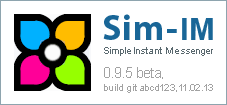
<style>
.page{position:relative;width:227px;height:105px;background:#ffffff}
.page>*{position:absolute;margin:0}
.t1{font:36.2px "MyriadPro-Bold";letter-spacing:0.02em;color:#196697}
.t2{font:36.2px "Arial-BoldMT";letter-spacing:-0.08em;color:#196697}
.t3{font:31.5px "Arial-BoldMT";color:#196697}
.t4{font:10.4px "ArialMT";letter-spacing:-0.02em;color:#59686e}
.t5{font:10.4px "ArialMT";letter-spacing:-0.1em;color:#59686e}
.t6{font:10.4px "ArialMT";letter-spacing:0.06em;color:#59686e}
.t7{font:10.4px "ArialMT";letter-spacing:-0.12em;color:#59686e}
.t8{font:10.4px "ArialMT";letter-spacing:-0.08em;color:#59686e}
.t9{font:10.4px/12.5px "ArialMT";letter-spacing:-0.061em;color:#a2a2a2}
.t10{font:14.6px/12.5px "ArialMT";letter-spacing:-0.04em;color:#a2a2a2}
.t11{font:10.4px/12.5px "ArialMT";letter-spacing:-0.04em;color:#a2a2a2}
</style>
<div class="page">
<p class="t1" style="left:103px;top:14px;width:110px;height:26px">Sim <span class="t2">- </span><span class="t3">IM</span></p>
<p class="t4" style="left:104px;top:47px;width:109px;height:9px"><span class="t5">Simple </span>Instant <span class="t6">Mess</span><span class="t7">en</span><span class="t8">ger</span></p>
<p class="t9" style="left:104px;top:67px;width:109px;height:26px"><span class="t10">0.9.5 beta</span><span class="t11">, <br></span>build git abcd123,11.02.13</p>
</div>
